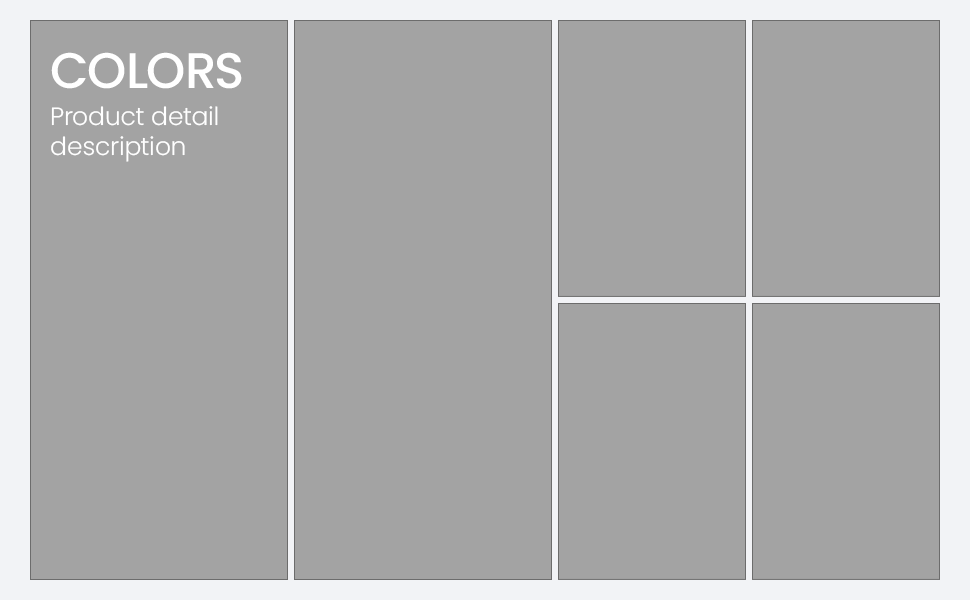
<style>
.page{position:relative;width:970px;height:600px;background:#a3a3a3}
.page>*{position:absolute;margin:0}
.t1{font:50px "Poppins-Medium";color:#ffffff;text-transform:uppercase}
.t2{font:25px "Poppins-Light";color:#ffffff}
</style>
<div class="page">
<p class="t1" style="left:51px;top:52px;width:191px;height:37px">COLORS</p>
<p class="t2" style="left:51px;top:106px;width:167px;height:56px">Product detail<br>description</p>
</div>
